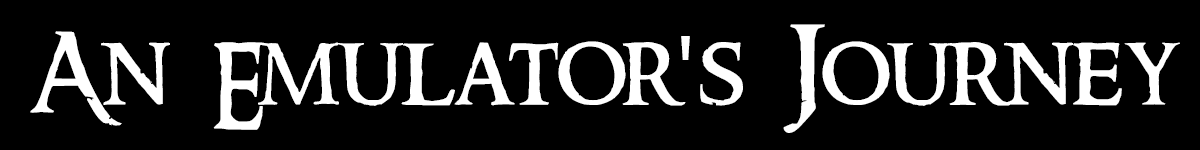
<style>
.page{position:relative;width:1200px;height:150px;background:#000000}
.page>*{position:absolute;margin:0}
.t1{font:100px "RingbearerMedium";color:#ffffff}
.t2{font:100px "MyriadPro-Regular";color:#ffffff}
</style>
<div class="page">
<p class="t1" style="left:30px;top:24px;width:1150px;height:109px">An  Emulator<span class="t2">'</span>s  Journey</p>
</div>
